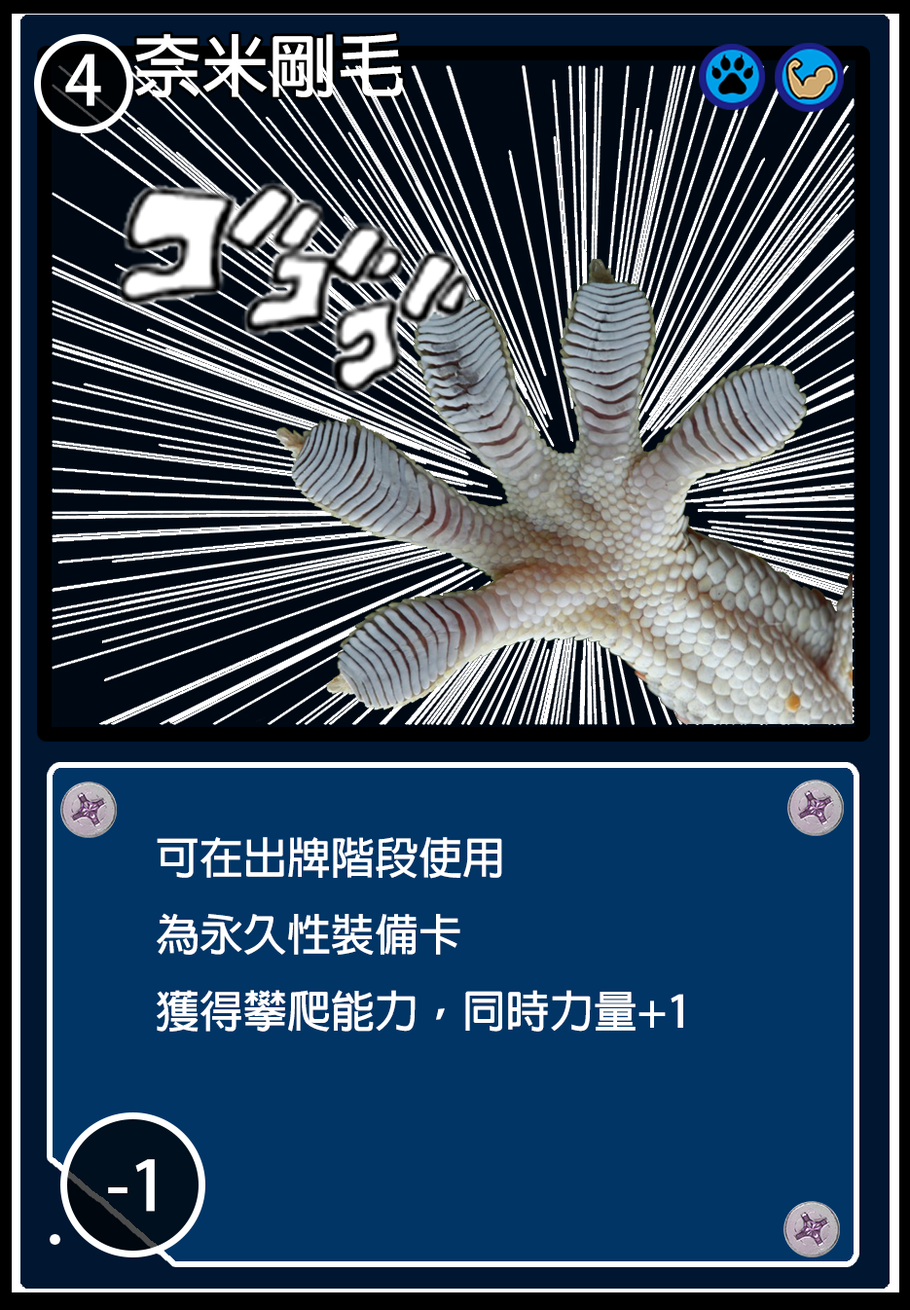
<style>
.page{position:relative;width:910px;height:1310px;background:#003566}
.page>*{position:absolute;margin:0}
.t1{font:68.1px "AdobeFanHeitiStd-Bold";color:#ffffff}
.t2{font:67.8px "AdobeFanHeitiStd-Bold";color:#ffffff}
.t3{font:43.8px "AdobeFanHeitiStd-Bold";color:#ffffff}
</style>
<div class="page">
<p class="t1" style="left:134px;top:33px;width:269px;height:64px">奈米剛毛</p>
<p class="t2" style="left:65px;top:54px;width:36px;height:52px">4</p>
<p class="t3" style="left:157px;top:837px;width:526px;height:195px">可在出牌階段使用<br>為永久性裝備卡<br>獲得攀爬能力，同時力量+1</p>
<p class="t1" style="left:108px;top:1159px;width:47px;height:53px">-1</p>
</div>
